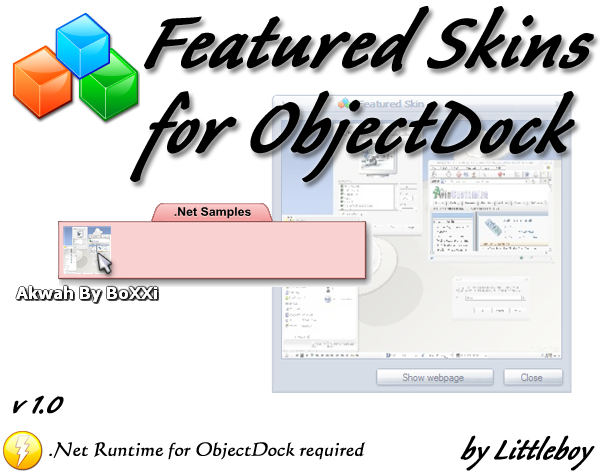
<style>
.page{position:relative;width:600px;height:474px;background:#ffffff}
.page>*{position:absolute;margin:0}
.t1{font:94px/85px "CalibanStd";color:#000000;font-weight:bold;font-style:italic}
.t2{font:36px "CalibanStd";color:#000000;font-weight:bold;font-style:italic}
.t3{font:18px "Calligraphic421BT-RomanB";color:#000000;font-weight:bold;font-style:italic}
</style>
<div class="page">
<p class="t1" style="left:130px;top:6px;width:464px;height:177px">Featured Skins for ObjectDock</p>
<p class="t2" style="left:13px;top:395px;width:51px;height:19px">v 1.0</p>
<p class="t2" style="left:460px;top:435px;width:135px;height:36px">by Littleboy</p>
<p class="t3" style="left:49px;top:442px;width:316px;height:18px">.Net Runtime for ObjectDock required</p>
</div>
